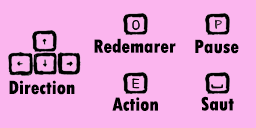
<style>
.page{position:relative;width:256px;height:128px;background:#fbb5ee}
.page>*{position:absolute;margin:0}
.t1{font:20px "TwCenMT-CondensedExtraBold";color:#000000}
</style>
<div class="page">
<p class="t1" style="left:94px;top:38px;width:82px;height:15px">Redemarer</p>
<p class="t1" style="left:195px;top:39px;width:44px;height:15px">Pause</p>
<p class="t1" style="left:9px;top:80px;width:66px;height:15px">Direction</p>
<p class="t1" style="left:112px;top:97px;width:46px;height:14px">Action</p>
<p class="t1" style="left:201px;top:96px;width:33px;height:15px">Saut</p>
</div>
